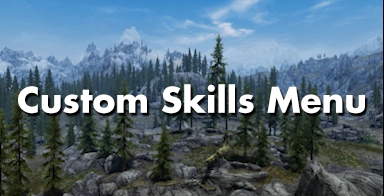
<style>
.page{position:relative;width:384px;height:196px}
.page>*{position:absolute;margin:0}
.t1{font:34.4px "FuturaStd-Bold";color:#ffffff}
</style>
<div class="page">
<p class="t1" style="left:18px;top:84px;width:347px;height:30px">Custom Skills Menu</p>
<p class="t1" style="left:18px;top:84px;width:347px;height:30px">Custom Skills Menu</p>
</div>
